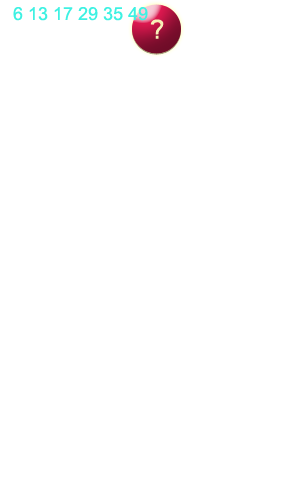
<style>
.page{position:relative;width:305px;height:500px;background:#ffffff}
.page>*{position:absolute;margin:0}
.t1{font:18px "ArialMT";color:#3ef1e2}
</style>
<div class="page">
<p class="t1" style="left:13px;top:7px;width:135px;height:14px">6 13 17 29 35 49</p>
</div>
